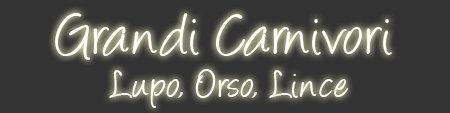
<style>
.page{position:relative;width:450px;height:113px;background:#333333}
.page>*{position:absolute;margin:0}
.t1{font:67.8px "Angelina";color:#ffffff}
.t2{font:45.2px "Angelina";color:#ffffff}
</style>
<div class="page">
<p class="t1" style="left:55px;top:13px;width:337px;height:47px">Grandi Carnivori</p>
<p class="t2" style="left:109px;top:69px;width:239px;height:39px">Lupo, Orso, Lince</p>
</div>
